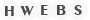
<style>
.page{position:relative;width:90px;height:20px;background:#f8f8f8}
.page>*{position:absolute;margin:0}
.t1{font:15.8px "Exotic350BT-Bold";letter-spacing:0.12em;color:#4b4b4b}
</style>
<div class="page">
<p class="t1" style="left:5px;top:6px;width:9px;height:10px">H</p>
<p class="t1" style="left:20px;top:6px;width:14px;height:10px">W</p>
<p class="t1" style="left:41px;top:5px;width:7px;height:10px">E</p>
<p class="t1" style="left:57px;top:5px;width:9px;height:10px">B</p>
<p class="t1" style="left:74px;top:5px;width:8px;height:10px">S</p>
</div>
